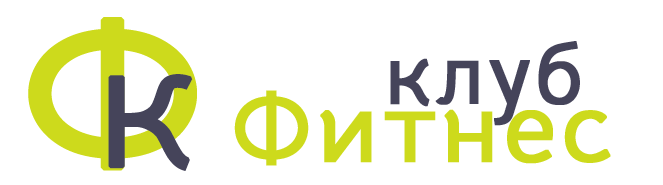
<style>
.page{position:relative;width:663px;height:185px;background:#ffffff}
.page>*{position:absolute;margin:0}
.t1{font:197.6px "BellotaText-Bold";letter-spacing:0.015em;color:#cdda1c;font-weight:bold;scale:1.16 1}
.t2{font:84px "BellotaText-Bold";letter-spacing:0.035em;color:#45445a;font-weight:bold}
.t3{font:129.3px "BellotaText-Bold";letter-spacing:0.015em;color:#45445a;font-weight:bold;scale:1.16 1}
.t4{font:99px "BellotaText-Bold";letter-spacing:0.035em;color:#cdda1c;font-weight:bold}
</style>
<div class="page">
<p class="t1" style="left:28px;top:17px;width:169px;height:154px">Ф</p>
<p class="t2" style="left:390px;top:41px;width:190px;height:85px">клуб</p>
<p class="t3" style="left:108px;top:74px;width:85px;height:97px">К</p>
<p class="t4" style="left:234px;top:90px;width:377px;height:76px">Фитнес</p>
</div>
